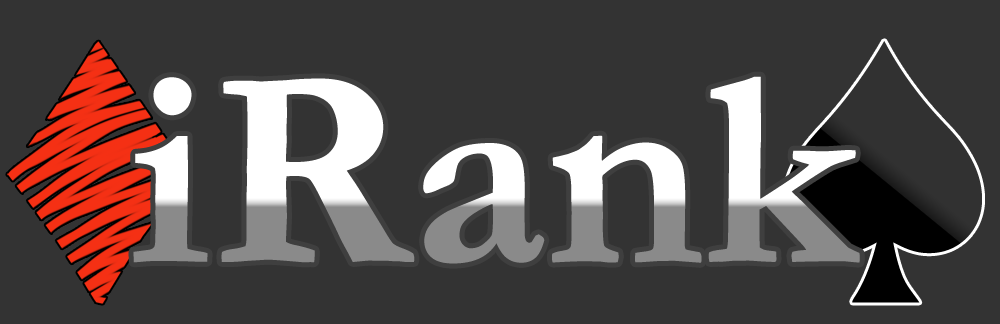
<style>
.page{position:relative;width:1000px;height:324px;background:#333333}
.page>*{position:absolute;margin:0}
.t1{font:285px "Garamond-Bold";letter-spacing:-0.025em;font-weight:bold}
</style>
<div class="page">
<p class="t1" style="left:133px;top:76px;width:727px;height:188px">iRank</p>
</div>
